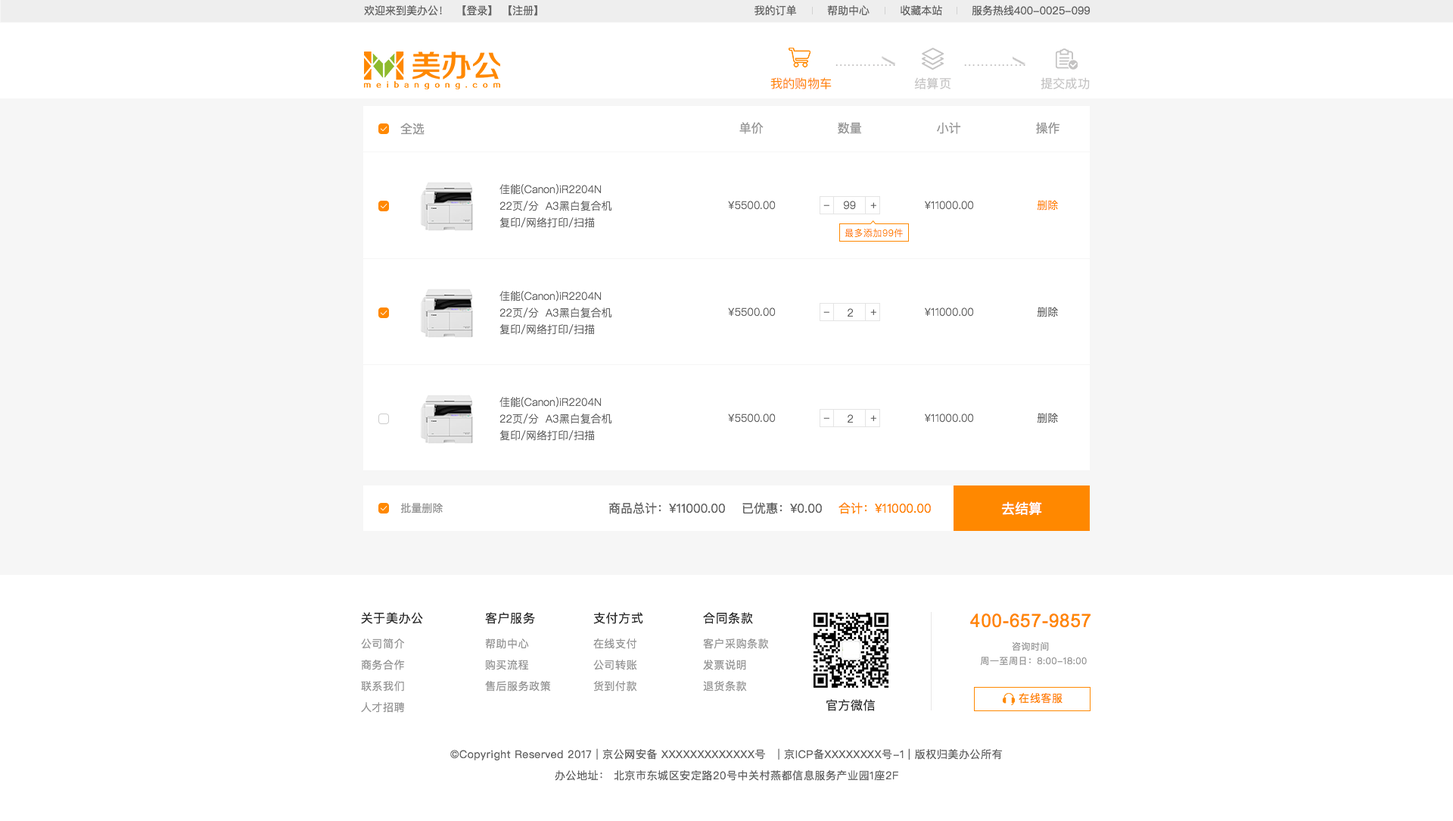
<style>
.page{position:relative;width:1453px;height:821px;background:#ffffff}
.page>*{position:absolute;margin:0}
.t1{font:10.6px "PingFangSC-Regular";color:#666666}
.t2{font:12.3px "PingFangSC-Regular";color:#c4c3c3}
.t3{font:12.3px "PingFangSC-Regular";color:#ff8800}
.t4{font:12.1px "PingFangSC-Regular";color:#999999}
.t5{font:10.6px/16.7px "PingFangSC-Light";color:#666666}
.t6{font:10.6px "PingFangSC-Light";color:#666666}
.t7{font:10.6px "PingFangSC-Light"}
.t8{font:10.6px "PingFangSC-Light";color:#ff8800}
.t9{font:9.1px "PingFangSC-Light";letter-spacing:0.04em;color:#ff8800}
.t10{font:10.6px "PingFangSC-Regular";color:#999999}
.t11{font:12.1px "PingFangSC-Regular";color:#666666}
.t12{font:12.1px "PingFangSC-Regular";color:#ff8800}
.t13{font:13.6px "PingFangSC-Regular";color:#ffffff}
.t14{font:12.1px "PingFangSC-Regular";letter-spacing:0.04em;color:#333333}
.t15{font:18.2px "ArialMT";letter-spacing:0.04em;color:#ff8800}
.t16{font:10.6px/21.2px "PingFangSC-Regular";letter-spacing:0.04em;color:#999999}
.t17{font:9.1px "PingFangSC-Regular";letter-spacing:0.04em;color:#999999}
.t18{font:10.6px "PingFangSC-Regular";letter-spacing:0.04em;color:#ff8800}
.t19{font:10.6px/21.2px "PingFangSC-Regular";letter-spacing:0.04em;color:#666666}
</style>
<div class="page">
<p class="t1" style="left:364px;top:5px;width:173px;height:11px">欢迎来到美办公！  【登录】 【注册】</p>
<p class="t1" style="left:755px;top:5px;width:42px;height:11px">我的订单</p>
<p class="t1" style="left:827px;top:5px;width:43px;height:11px">帮助中心</p>
<p class="t1" style="left:901px;top:5px;width:41px;height:11px">收藏本站</p>
<p class="t1" style="left:972px;top:5px;width:119px;height:11px">服务热线400-0025-099</p>
<p class="t2" style="left:836px;top:64px;width:34px;height:3px">………</p>
<p class="t2" style="left:873px;top:64px;width:22px;height:3px">……</p>
<p class="t2" style="left:964px;top:64px;width:24px;height:3px">……</p>
<p class="t2" style="left:990px;top:64px;width:36px;height:3px">………</p>
<p class="t3" style="left:771px;top:77px;width:61px;height:12px">我的购物车</p>
<p class="t2" style="left:914px;top:77px;width:37px;height:12px">结算页</p>
<p class="t2" style="left:1041px;top:77px;width:49px;height:12px">提交成功</p>
<p class="t4" style="left:400px;top:123px;width:25px;height:12px">全选</p>
<p class="t4" style="left:740px;top:122px;width:24px;height:12px">单价</p>
<p class="t4" style="left:838px;top:122px;width:24px;height:12px">数量</p>
<p class="t4" style="left:937px;top:122px;width:24px;height:12px">小计</p>
<p class="t4" style="left:1036px;top:122px;width:24px;height:12px">操作</p>
<p class="t5" style="left:500px;top:184px;width:112px;height:44px">佳能(Canon)iR2204N <br>22页/分  A3黑白复合机 <br>复印/网络打印/扫描</p>
<p class="t6" style="left:728px;top:201px;width:48px;height:9px">¥5500.00</p>
<p class="t7" style="left:824px;top:204px;width:6px;height:2px">-</p>
<p class="t6" style="left:843px;top:201px;width:13px;height:9px">99</p>
<p class="t6" style="left:870px;top:202px;width:7px;height:6px">+</p>
<p class="t6" style="left:925px;top:201px;width:49px;height:9px">¥11000.00</p>
<p class="t8" style="left:1037px;top:200px;width:21px;height:10px">删除</p>
<p class="t9" style="left:845px;top:228px;width:58px;height:10px">最多添加99件</p>
<p class="t5" style="left:500px;top:291px;width:112px;height:44px">佳能(Canon)iR2204N <br>22页/分  A3黑白复合机 <br>复印/网络打印/扫描</p>
<p class="t6" style="left:728px;top:307px;width:48px;height:9px">¥5500.00</p>
<p class="t7" style="left:824px;top:311px;width:6px;height:2px">-</p>
<p class="t6" style="left:848px;top:308px;width:5px;height:8px">2</p>
<p class="t6" style="left:870px;top:309px;width:7px;height:6px">+</p>
<p class="t6" style="left:925px;top:307px;width:49px;height:9px">¥11000.00</p>
<p class="t6" style="left:1037px;top:307px;width:21px;height:10px">删除</p>
<p class="t5" style="left:500px;top:397px;width:112px;height:44px">佳能(Canon)iR2204N <br>22页/分  A3黑白复合机 <br>复印/网络打印/扫描</p>
<p class="t6" style="left:728px;top:413px;width:48px;height:9px">¥5500.00</p>
<p class="t6" style="left:925px;top:413px;width:49px;height:9px">¥11000.00</p>
<p class="t6" style="left:1037px;top:413px;width:21px;height:10px">删除</p>
<p class="t7" style="left:824px;top:417px;width:6px;height:2px">-</p>
<p class="t6" style="left:848px;top:414px;width:5px;height:8px">2</p>
<p class="t6" style="left:870px;top:415px;width:7px;height:6px">+</p>
<p class="t10" style="left:400px;top:503px;width:43px;height:10px">批量删除</p>
<p class="t11" style="left:609px;top:502px;width:322px;height:12px">商品总计：¥11000.00    已优惠：¥0.00    <span class="t12">合计：¥11000.00</span></p>
<p class="t13" style="left:1001px;top:501px;width:41px;height:14px">去结算</p>
<p class="t14" style="left:361px;top:612px;width:62px;height:12px">关于美办公</p>
<p class="t14" style="left:485px;top:612px;width:50px;height:12px">客户服务</p>
<p class="t14" style="left:593px;top:612px;width:50px;height:12px">支付方式</p>
<p class="t14" style="left:703px;top:612px;width:50px;height:12px">合同条款</p>
<p class="t15" style="left:970px;top:613px;width:121px;height:14px">400-657-9857</p>
<p class="t16" style="left:361px;top:638px;width:44px;height:74px">公司简介<br>商务合作<br>联系我们<br>人才招聘</p>
<p class="t16" style="left:485px;top:638px;width:66px;height:53px">帮助中心<br>购买流程<br>售后服务政策</p>
<p class="t16" style="left:593px;top:638px;width:44px;height:53px">在线支付<br>公司转账<br>货到付款</p>
<p class="t16" style="left:703px;top:638px;width:66px;height:53px">客户采购条款<br>发票说明<br>退货条款</p>
<p class="t17" style="left:1012px;top:641px;width:37px;height:10px">咨询时间</p>
<p class="t17" style="left:980px;top:656px;width:107px;height:9px">周一至周日：8:00-18:00</p>
<p class="t14" style="left:827px;top:699px;width:49px;height:12px">官方微信</p>
<p class="t18" style="left:1019px;top:693px;width:44px;height:10px">在线客服</p>
<p class="t19" style="left:450px;top:748px;width:553px;height:32px;text-align:center">©Copyright Reserved 2017 | 京公网安备 XXXXXXXXXXXXX号   | 京ICP备XXXXXXXX号-1 | 版权归美办公所有<br>办公地址： 北京市东城区安定路20号中关村燕都信息服务产业园1座2F</p>
</div>
